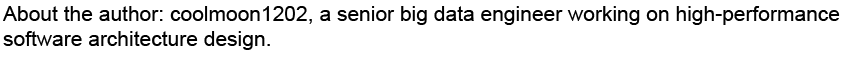
<style>
.page{position:relative;width:864px;height:58px;background:#ffffff}
.page>*{position:absolute;margin:0}
.t1{font:21px/25px "ArialMT";color:#000000}
</style>
<div class="page">
<p class="t1" style="left:3px;top:6px;width:837px;height:44px">About the author: coolmoon1202, a senior big data engineer working on high-performance <br>software architecture design.</p>
</div>
